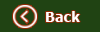
<style>
.page{position:relative;width:100px;height:32px;background:#204313}
.page>*{position:absolute;margin:0}
.t1{font:13.7px "Verdana-Bold";color:#fefffd;scale:0.95 1}
</style>
<div class="page">
<p class="t1" style="left:46px;top:11px;width:34px;height:11px">Back</p>
</div>
